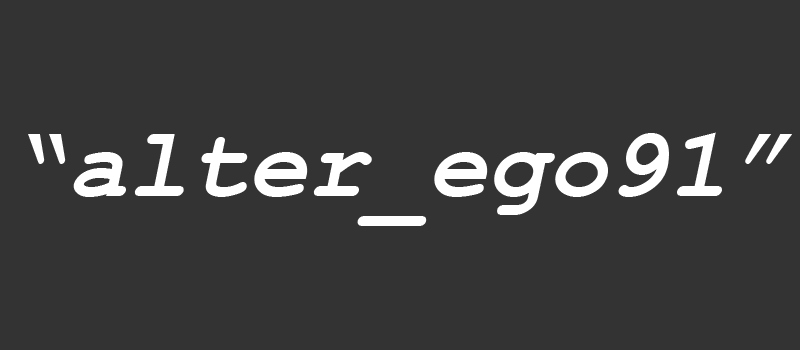
<style>
.page{position:relative;width:800px;height:350px;background:#333333}
.page>*{position:absolute;margin:0}
.t1{font:100px "CourierNewPS-BoldItalicMT";color:#ffffff}
</style>
<div class="page">
<p class="t1" style="left:28px;top:132px;width:764px;height:94px">“alter_ego91”</p>
</div>
